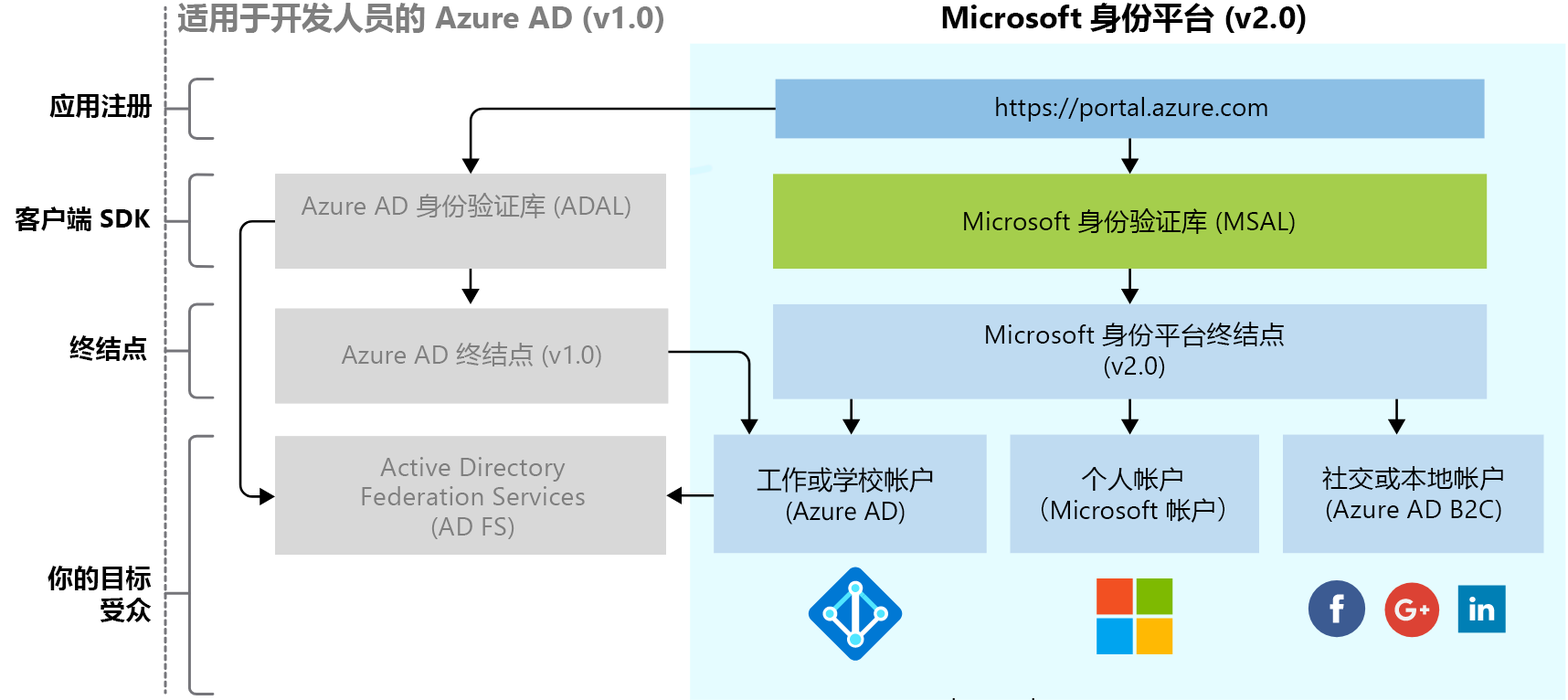
<style>
.page{position:relative;width:1568px;height:700px;background:#ffffff}
.page>*{position:absolute;margin:0}
.t1{font:31.1px "SegoeUI-Bold";color:#7f7f7f}
.t2{font:31.1px "MicrosoftYaHei-Bold";color:#7f7f7f}
.t3{font:31.1px "SegoeUI-Bold";color:#000000}
.t4{font:31.1px "MicrosoftYaHei-Bold";color:#000000}
.t5{font:25.7px "MicrosoftYaHei-Bold";color:#000000}
.t6{font:26px "SegoeUI";color:#000000}
.t7{font:26px "SegoeUI";color:#7f7f7f}
.t8{font:26px "MicrosoftYaHei";color:#7f7f7f}
.t9{font:26px "MicrosoftYaHei-Bold";color:#000000}
.t10{font:26px "SegoeUI-Bold";color:#000000}
.t11{font:26px "MicrosoftYaHei";color:#000000}
.t12{font:26px/31.1px "SegoeUI";color:#000000}
.t13{font:26px/31.1px "MicrosoftYaHei";color:#000000}
.t14{font:26px/29.5px "SegoeUI";color:#7f7f7f}
.t15{font:26px/31.1px "AdobeHeitiStd-Regular";color:#000000}
.t16{font:26px/32px "MicrosoftYaHei-Bold";color:#000000}
</style>
<div class="page">
<p class="t1" style="left:177px;top:3px;width:486px;height:30px"><span class="t2">适用于开发人员的</span> Azure AD (v1.0)</p>
<p class="t3" style="left:942px;top:3px;width:364px;height:31px">Microsoft <span class="t4">身份平台</span> (v2.0<span class="t4">)</span></p>
<p class="t5" style="left:49px;top:93px;width:104px;height:25px">应用注册</p>
<p class="t6" style="left:996px;top:97px;width:271px;height:25px">https://portal.azure.com</p>
<p class="t7" style="left:301px;top:193px;width:329px;height:25px">Azure AD <span class="t8">身份验证库</span> (ADAL)</p>
<p class="t9" style="left:15px;top:207px;width:136px;height:24px">客户端<span class="t10"> SDK</span></p>
<p class="t6" style="left:964px;top:208px;width:331px;height:26px">Microsoft <span class="t11">身份验证库</span> (MSAL)</p>
<p class="t12" style="left:986px;top:322px;width:298px;height:56px;text-align:center">Microsoft <span class="t13">身份平台终结点</span> (v2.0)</p>
<p class="t9" style="left:69px;top:335px;width:78px;height:26px">终结点</p>
<p class="t7" style="left:341px;top:342px;width:260px;height:25px">Azure AD <span class="t8">终结点</span> (v1.0)</p>
<p class="t14" style="left:362px;top:457px;width:223px;height:82px;text-align:center">Active Directory Federation Services (AD FS)</p>
<p class="t12" style="left:757px;top:467px;width:176px;height:57px;text-align:center"><span class="t13">工作或学校帐户</span> (Azure AD)</p>
<p class="t12" style="left:1042px;top:467px;width:182px;height:56px;text-align:center"><span class="t13">个人帐户<br></span><span class="t15">（</span>Microsoft <span class="t13">帐户</span><span class="t15">）</span></p>
<p class="t12" style="left:1322px;top:466px;width:181px;height:56px;text-align:center"><span class="t13">社交或本地帐户</span> (Azure AD B2C)</p>
<p class="t16" style="left:48px;top:566px;width:104px;height:56px;text-align:right">你的目标<br>受众</p>
</div>
